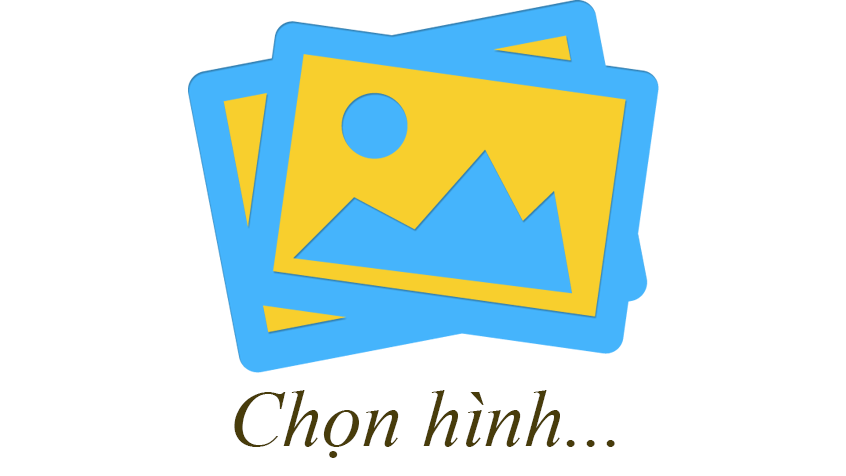
<style>
.page{position:relative;width:846px;height:476px;background:#ffffff}
.page>*{position:absolute;margin:0}
.t1{font:80px "TimesNewRomanPS-ItalicMT";color:#483c0b}
</style>
<div class="page">
<p class="t1" style="left:234px;top:390px;width:381px;height:68px">Chọn hình...</p>
</div>
